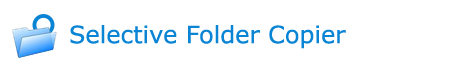
<style>
.page{position:relative;width:453px;height:69px;background:#ffffff}
.page>*{position:absolute;margin:0}
.t1{font:24px "MSReferenceSansSerif";color:#0a84d4}
</style>
<div class="page">
<p class="t1" style="left:70px;top:25px;width:276px;height:24px">Selective Folder Copier</p>
</div>
